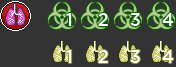
<style>
.page{position:relative;width:176px;height:67px;background:#333333}
.page>*{position:absolute;margin:0}
.t1{font:18.1px "Gotham-Medium";color:#ffffff}
</style>
<div class="page">
<p class="t1" style="left:66px;top:13px;width:6px;height:13px">1</p>
<p class="t1" style="left:98px;top:13px;width:10px;height:13px">2</p>
<p class="t1" style="left:130px;top:13px;width:10px;height:13px">3</p>
<p class="t1" style="left:162px;top:13px;width:12px;height:13px">4</p>
<p class="t1" style="left:66px;top:50px;width:6px;height:13px">1</p>
<p class="t1" style="left:98px;top:50px;width:10px;height:13px">2</p>
<p class="t1" style="left:130px;top:50px;width:10px;height:13px">3</p>
<p class="t1" style="left:162px;top:50px;width:12px;height:13px">4</p>
</div>
